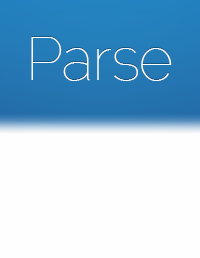
<style>
.page{position:relative;width:200px;height:258px;background:#fefefe}
.page>*{position:absolute;margin:0}
.t1{font:60px "Raleway-Thin";color:#ffffff}
</style>
<div class="page">
<p class="t1" style="left:31px;top:37px;width:141px;height:44px">Parse</p>
</div>
